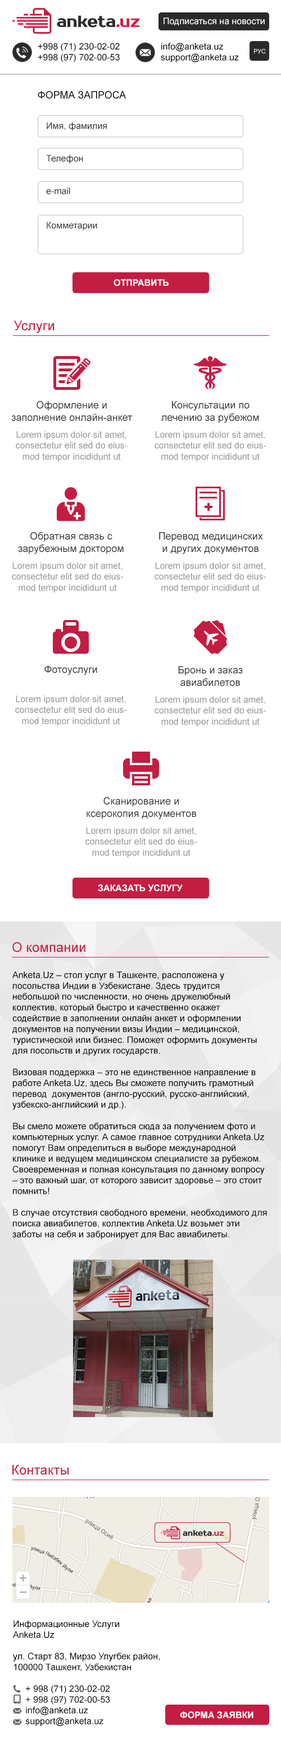
<style>
.page{position:relative;width:281px;height:1744px;background:#ffffff}
.page>*{position:absolute;margin:0}
.t1{font:9px "ArialMT";color:#ffffff}
.t2{font:9px "ArialMT";color:#000000}
.t3{font:6.2px "ArialMT";color:#ffffff;text-transform:uppercase}
.t4{font:10.1px "ArialMT";color:#050505;text-transform:uppercase}
.t5{font:9px "ArialMT";color:#353535}
.t6{font:9px "Arial-BoldMT";color:#ffffff;text-transform:uppercase}
.t7{font:13.5px "ArialMT";color:#c31d42}
.t8{font:10.1px "ArialMT";color:#333333}
.t9{font:9px "ArialMT";color:#969696}
</style>
<div class="page">
<p class="t1" style="left:164px;top:17px;width:101px;height:9px">Подписаться на новости</p>
<p class="t2" style="left:38px;top:43px;width:82px;height:19px">+998 (71) 230-02-02<br>+998 (97) 702-00-53</p>
<p class="t2" style="left:161px;top:43px;width:78px;height:19px">info@anketa.uz<br>support@anketa.uz</p>
<p class="t3" style="left:254px;top:49px;width:12px;height:4px">Рус</p>
<p class="t4" style="left:38px;top:91px;width:88px;height:8px">Форма запроса</p>
<p class="t5" style="left:47px;top:122px;width:60px;height:9px">Имя, фамилия</p>
<p class="t5" style="left:46px;top:155px;width:37px;height:9px">Телефон</p>
<p class="t5" style="left:46px;top:187px;width:24px;height:8px">e-mail</p>
<p class="t5" style="left:47px;top:222px;width:50px;height:9px">Комметарии</p>
<p class="t6" style="left:114px;top:279px;width:55px;height:7px">Отправить</p>
<p class="t7" style="left:14px;top:320px;width:41px;height:13px">Услуги</p>
<p class="t8" style="left:11px;top:400px;width:122px;height:21px;text-align:center">Оформление и заполнение онлайн-анкет</p>
<p class="t8" style="left:161px;top:401px;width:98px;height:22px;text-align:center">Консультации по лечению за рубежом</p>
<p class="t9" style="left:16px;top:431px;width:112px;height:31px;text-align:center">Lorem ipsum dolor sit amet, consectetur elit sed do eiusmod tempor incididunt ut</p>
<p class="t9" style="left:155px;top:431px;width:112px;height:31px;text-align:center">Lorem ipsum dolor sit amet, consectetur elit sed do eiusmod tempor incididunt ut</p>
<p class="t8" style="left:18px;top:532px;width:106px;height:22px;text-align:center">Обратная связь с зарубежным доктором</p>
<p class="t8" style="left:159px;top:532px;width:104px;height:22px;text-align:center">Перевод медицинских и других документов</p>
<p class="t9" style="left:12px;top:562px;width:112px;height:31px;text-align:center">Lorem ipsum dolor sit amet, consectetur elit sed do eiusmod tempor incididunt ut</p>
<p class="t9" style="left:155px;top:562px;width:112px;height:31px;text-align:center">Lorem ipsum dolor sit amet, consectetur elit sed do eiusmod tempor incididunt ut</p>
<p class="t8" style="left:44px;top:665px;width:53px;height:10px">Фотоуслуги</p>
<p class="t8" style="left:178px;top:666px;width:65px;height:20px;text-align:center">Бронь и заказ авиабилетов</p>
<p class="t9" style="left:15px;top:695px;width:112px;height:31px;text-align:center">Lorem ipsum dolor sit amet, consectetur elit sed do eiusmod tempor incididunt ut</p>
<p class="t9" style="left:155px;top:696px;width:112px;height:31px;text-align:center">Lorem ipsum dolor sit amet, consectetur elit sed do eiusmod tempor incididunt ut</p>
<p class="t8" style="left:87px;top:796px;width:109px;height:23px;text-align:center">Сканирование и ксерокопия документов</p>
<p class="t9" style="left:86px;top:827px;width:111px;height:31px;text-align:center">Lorem ipsum dolor sit amet, consectetur elit sed do eiusmod tempor incididunt ut</p>
<p class="t6" style="left:98px;top:884px;width:85px;height:8px">Заказать услугу</p>
<p class="t7" style="left:12px;top:942px;width:74px;height:10px">О компании</p>
<p class="t2" style="left:12px;top:971px;width:255px;height:268px">Anketa.Uz – стол услуг в Ташкенте, расположена у посольства Индии в Узбекистане. Здесь трудится небольшой по численности, но очень дружелюбный коллектив, который быстро и качественно окажет содействие в заполнении онлайн анкет и оформлении документов на получении визы Индии – медицинской, туристической или бизнес. Поможет оформить документы для посольств и других государств.  <br><br>Визовая поддержка – это не единственное направление в работе Anketa.Uz, здесь Вы сможете получить грамотный перевод  документов (англо-русский, русско-английский, узбекско-английский и др.). <br><br>Вы смело можете обратиться сюда за получением фото и компьютерных услуг. А самое главное сотрудники Anketa.Uz помогут Вам определиться в выборе международной клинике и ведущем медицинском специалисте за рубежом. Своевременная и полная консультация по данному вопросу – это важный шаг, от которого зависит здоровье – это стоит помнить!<br><br>В случае отсутствия свободного времени, необходимого для поиска авиабилетов, коллектив Anketa.Uz возьмет эти заботы на себя и забронирует для Вас авиабилеты.</p>
<p class="t7" style="left:12px;top:1464px;width:57px;height:11px">Контакты</p>
<p class="t2" style="left:13px;top:1620px;width:147px;height:106px">Информационные Услуги <br>Anketa.Uz<br><br>ул. Старт 83, Мирзо Улугбек район,<br>100000 Ташкент, Узбекистан<br><br>     + 998 (71) 230-02-02<br>     + 998 (97) 702-00-53<br>     info@anketa.uz<br>     support@anketa.uz</p>
<p class="t6" style="left:180px;top:1711px;width:74px;height:7px">форма заявки</p>
</div>
